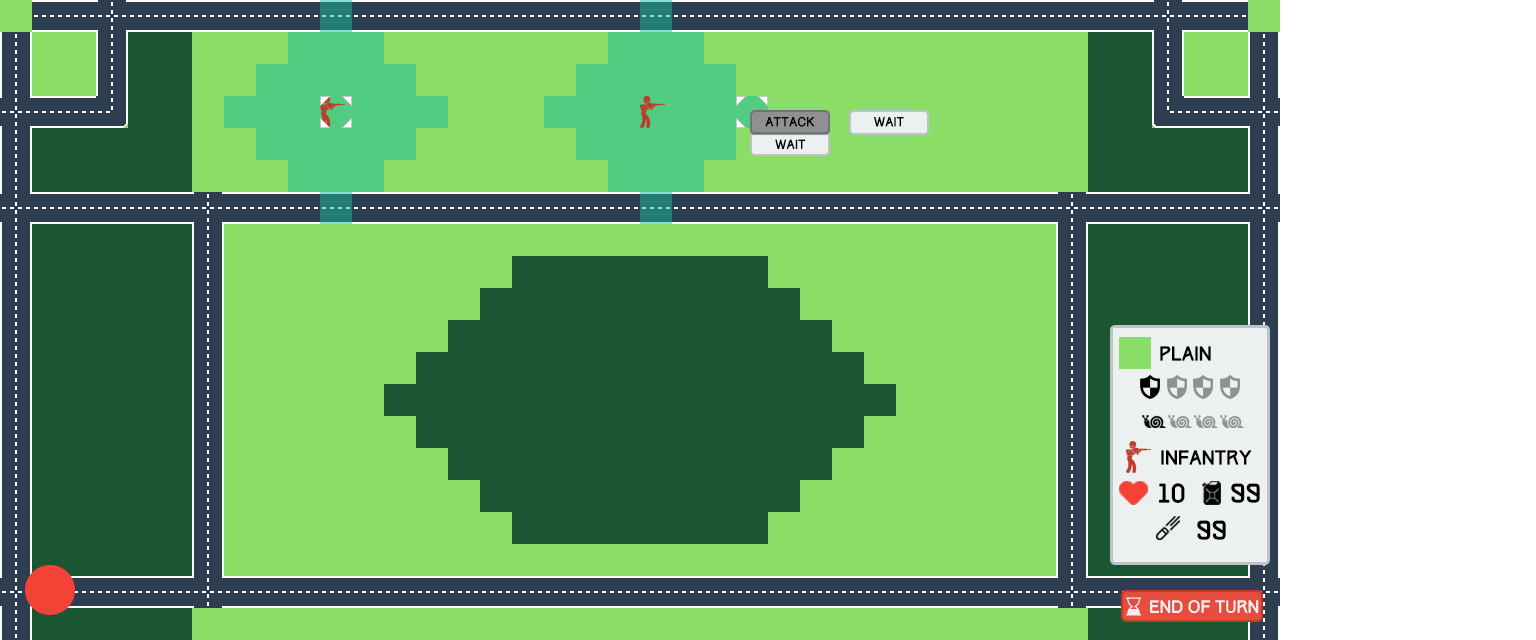
<style>
.page{position:relative;width:1536px;height:640px;background:#8add66}
.page>*{position:absolute;margin:0}
.t1{font:12px "Track";color:#000000}
.t2{font:18px "Track";color:#000000}
.t3{font:24px "Track";color:#000000}
</style>
<div class="page">
<p class="t1" style="left:765px;top:116px;width:50px;height:11px">ATTACK</p>
<p class="t1" style="left:874px;top:117px;width:30px;height:10px">WAIT</p>
<p class="t1" style="left:775px;top:139px;width:31px;height:10px">WAIT</p>
<p class="t2" style="left:1160px;top:346px;width:51px;height:15px">PLAIN</p>
<p class="t2" style="left:1161px;top:450px;width:91px;height:15px">Infantry</p>
<p class="t3" style="left:1159px;top:483px;width:26px;height:20px">10</p>
<p class="t3" style="left:1231px;top:483px;width:29px;height:20px">99</p>
<p class="t3" style="left:1197px;top:520px;width:29px;height:20px">99</p>
</div>
